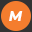
<style>
.page{position:relative;width:32px;height:32px;background:#f47d2e}
.page>*{position:absolute;margin:0}
.t1{font:14px "Montserrat-ExtraBoldItalic";color:#ffffff}
</style>
<div class="page">
<p class="t1" style="left:9px;top:11px;width:14px;height:10px">M</p>
</div>
